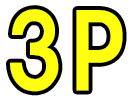
<style>
.page{position:relative;width:129px;height:105px;background:#ffffff}
.page>*{position:absolute;margin:0}
.t1{font:100px "HGPSoeiKakugothicUB";letter-spacing:0.05em;color:#ffff0f}
</style>
<div class="page">
<p class="t1" style="left:10px;top:9px;width:113px;height:83px">3P</p>
</div>
